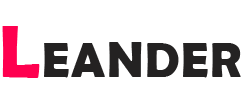
<style>
.page{position:relative;width:243px;height:107px;background:#ffffff}
.page>*{position:absolute;margin:0}
.t1{font:49px "BerlinSansFBDemi-Bold";letter-spacing:0.03em;color:#242222}
.t2{font:75px "BerlinSansFBDemi-Bold";letter-spacing:0.03em;color:#ff004f}
</style>
<div class="page">
<p class="t1" style="left:2px;top:26px;width:239px;height:52px"><span class="t2">L</span>EANDER</p>
</div>
